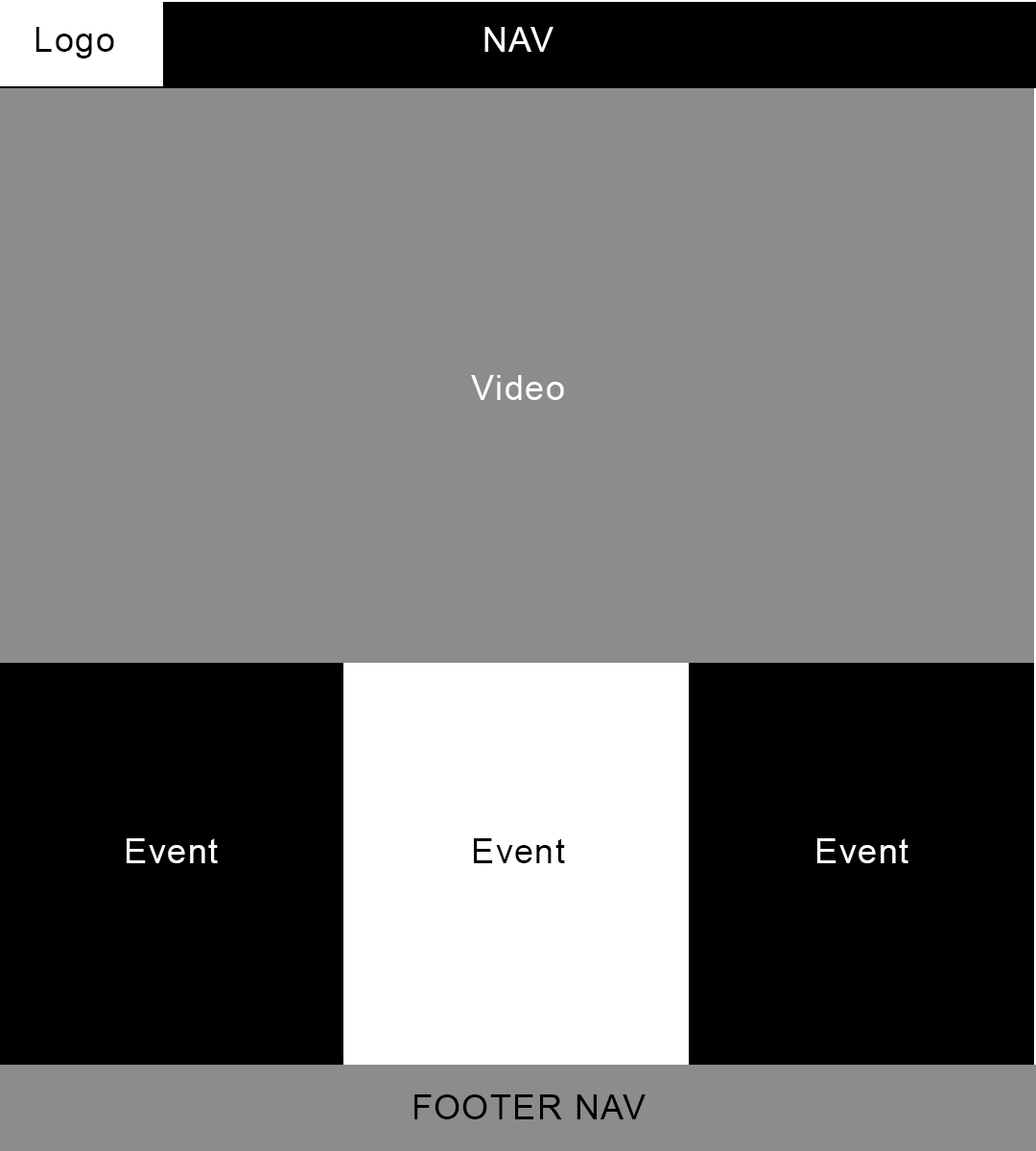
<style>
.page{position:relative;width:1036px;height:1151px;background:#8c8c8c}
.page>*{position:absolute;margin:0}
.t1{font:34.5px "ArialMT";letter-spacing:0.04em;color:#000000}
.t2{font:34.5px "ArialMT";letter-spacing:0.04em;color:#ffffff}
</style>
<div class="page">
<p class="t1" style="left:35px;top:27px;width:79px;height:32px">Logo</p>
<p class="t2" style="left:484px;top:27px;width:69px;height:25px">NAV</p>
<p class="t2" style="left:471px;top:375px;width:93px;height:25px">Video</p>
<p class="t2" style="left:127px;top:838px;width:91px;height:25px">Event</p>
<p class="t1" style="left:474px;top:838px;width:91px;height:25px">Event</p>
<p class="t2" style="left:817px;top:838px;width:91px;height:25px">Event</p>
<p class="t1" style="left:414px;top:1094px;width:232px;height:25px">FOOTER NAV</p>
</div>
